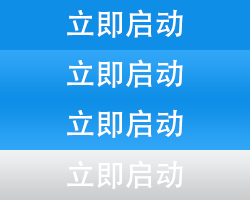
<style>
.page{position:relative;width:250px;height:200px;background:#0e8ee7}
.page>*{position:absolute;margin:0}
.t1{font:30px "AdobeHeitiStd-Regular";color:#ffffff}
</style>
<div class="page">
<p class="t1" style="left:67px;top:9px;width:116px;height:29px">立即启动</p>
<p class="t1" style="left:67px;top:59px;width:116px;height:29px">立即启动</p>
<p class="t1" style="left:67px;top:109px;width:116px;height:29px">立即启动</p>
<p class="t1" style="left:67px;top:160px;width:116px;height:29px">立即启动</p>
</div>
